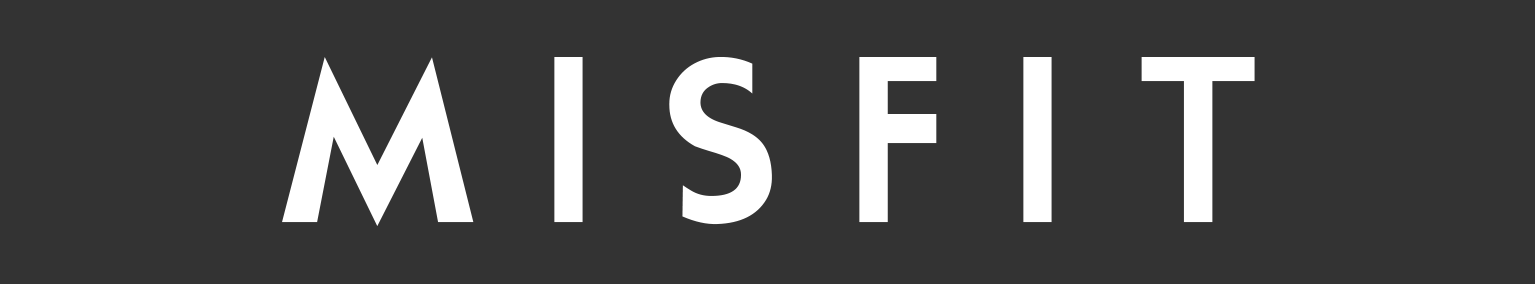
<style>
.page{position:relative;width:1535px;height:284px;background:#333333}
.page>*{position:absolute;margin:0}
.t1{font:208.3px "Moderna";letter-spacing:0.35em;color:#ffffff}
</style>
<div class="page">
<p class="t1" style="left:282px;top:57px;width:973px;height:169px">MISFIT</p>
</div>
